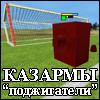
<style>
.page{position:relative;width:100px;height:100px}
.page>*{position:absolute;margin:0}
.t1{font:18px "TimesNewRomanPS-BoldMT";color:#ffffff}
.t2{font:16.3px "TimesNewRomanPS-BoldMT";color:#ffffff;scale:0.85 1}
</style>
<div class="page">
<p class="t1" style="left:3px;top:69px;width:94px;height:12px">КАЗАРМЫ</p>
<p class="t2" style="left:3px;top:84px;width:94px;height:13px">“поджигатели”</p>
</div>
